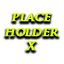
<style>
.page{position:relative;width:64px;height:64px;background:#ffffff}
.page>*{position:absolute;margin:0}
.t1{font:12px "TrajanPro-Bold";color:#deff01;font-weight:bold;font-style:italic}
</style>
<div class="page">
<p class="t1" style="left:4px;top:13px;width:55px;height:38px;text-align:center">place<br>holder<br>X</p>
</div>
